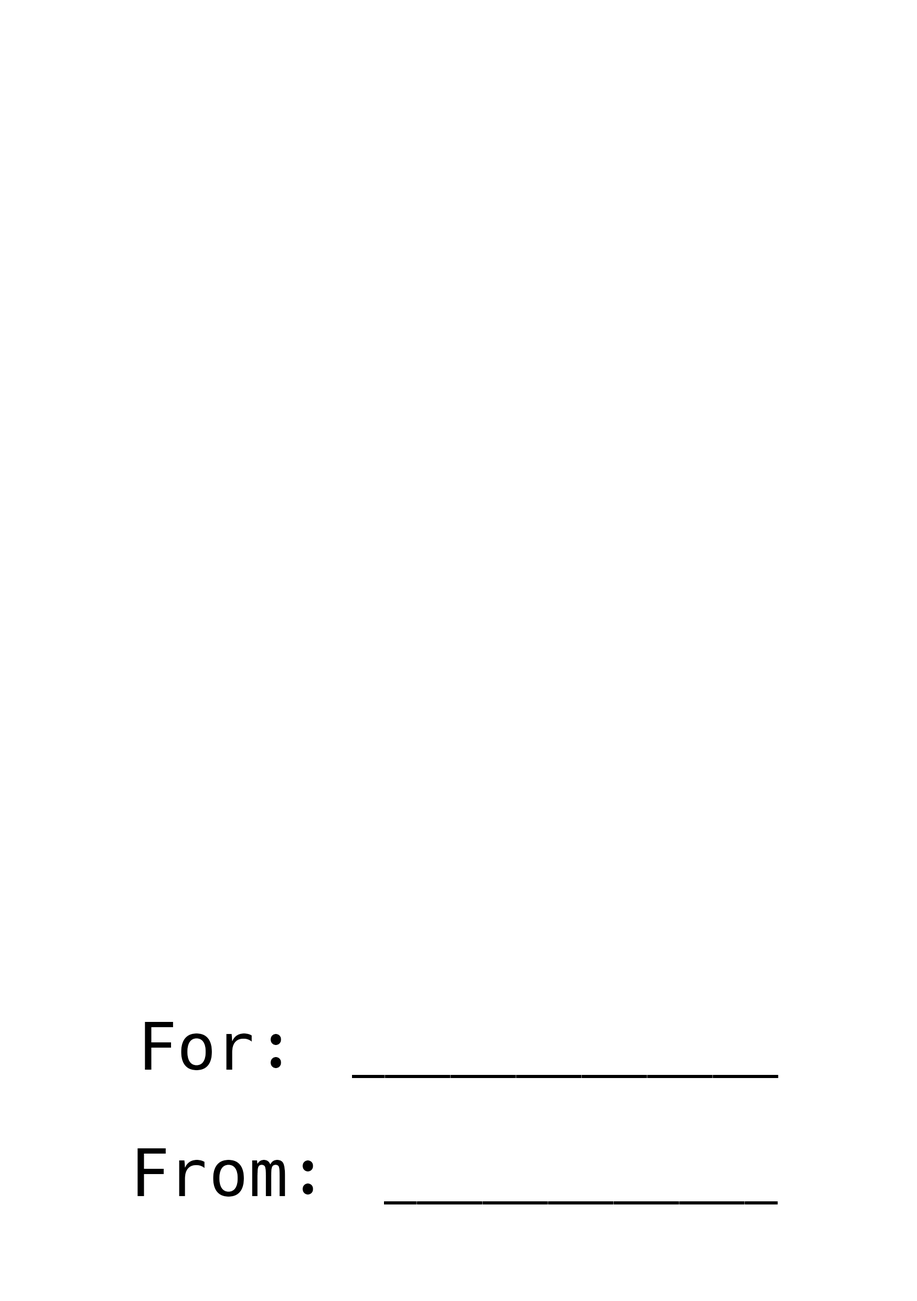
<style>
.page{position:relative;width:917px;height:1301px;background:#ffffff}
.page>*{position:absolute;margin:0}
.t1{font:65.6px "Helvetica-Light";color:#000000}
.t2{font:65.6px "Hack-Regular";color:#000000}
</style>
<div class="page">
<p class="t1" style="left:145px;top:1022px;width:633px;height:56px"><span class="t2">For:  </span>_____________</p>
<p class="t1" style="left:137px;top:1148px;width:641px;height:56px"><span class="t2">From:  </span>____________</p>
</div>
